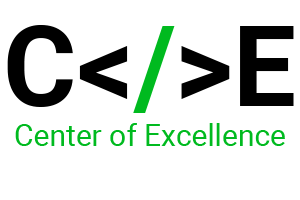
<style>
.page{position:relative;width:300px;height:200px;background:#ffffff}
.page>*{position:absolute;margin:0}
.t1{font:112px "Roboto-Bold";color:#000000}
.t2{font:112px "Roboto-Bold";color:#00ba1f}
.t3{font:30px "Roboto-Regular";color:#00ba1f}
</style>
<div class="page">
<p class="t1" style="left:7px;top:25px;width:287px;height:88px">C&lt;<span class="t2">/</span>&gt;E</p>
<p class="t3" style="left:15px;top:123px;width:270px;height:23px">Center of Excellence</p>
</div>
